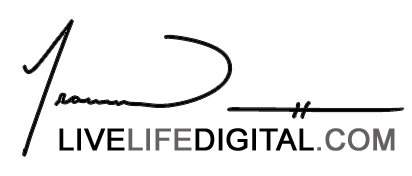
<style>
.page{position:relative;width:412px;height:176px;background:#ffffff}
.page>*{position:absolute;margin:0}
.t1{font:30px "ArialMT";color:#000000;font-weight:bold}
.t2{font:30px "ArialMT";color:#636161;font-weight:bold}
</style>
<div class="page">
<p class="t1" style="left:59px;top:128px;width:336px;height:23px">LIVE<span class="t2">LIFE</span>DIGITAL<span class="t2">.COM</span></p>
</div>
